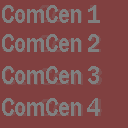
<style>
.page{position:relative;width:128px;height:128px;background:#804040}
.page>*{position:absolute;margin:0}
.t1{font:27px/29px "FranklinGothic-Medium";letter-spacing:-0.04em;color:#808080;scale:0.9 1}
.t2{font:27px/32px "FranklinGothic-Medium";letter-spacing:-0.04em;color:#808080;scale:0.9 1}
</style>
<div class="page">
<p class="t1" style="left:2px;top:5px;width:98px;height:111px">ComCen 1<br>ComCen 2<br><span class="t2">ComCen 3<br>ComCen 4</span></p>
</div>
